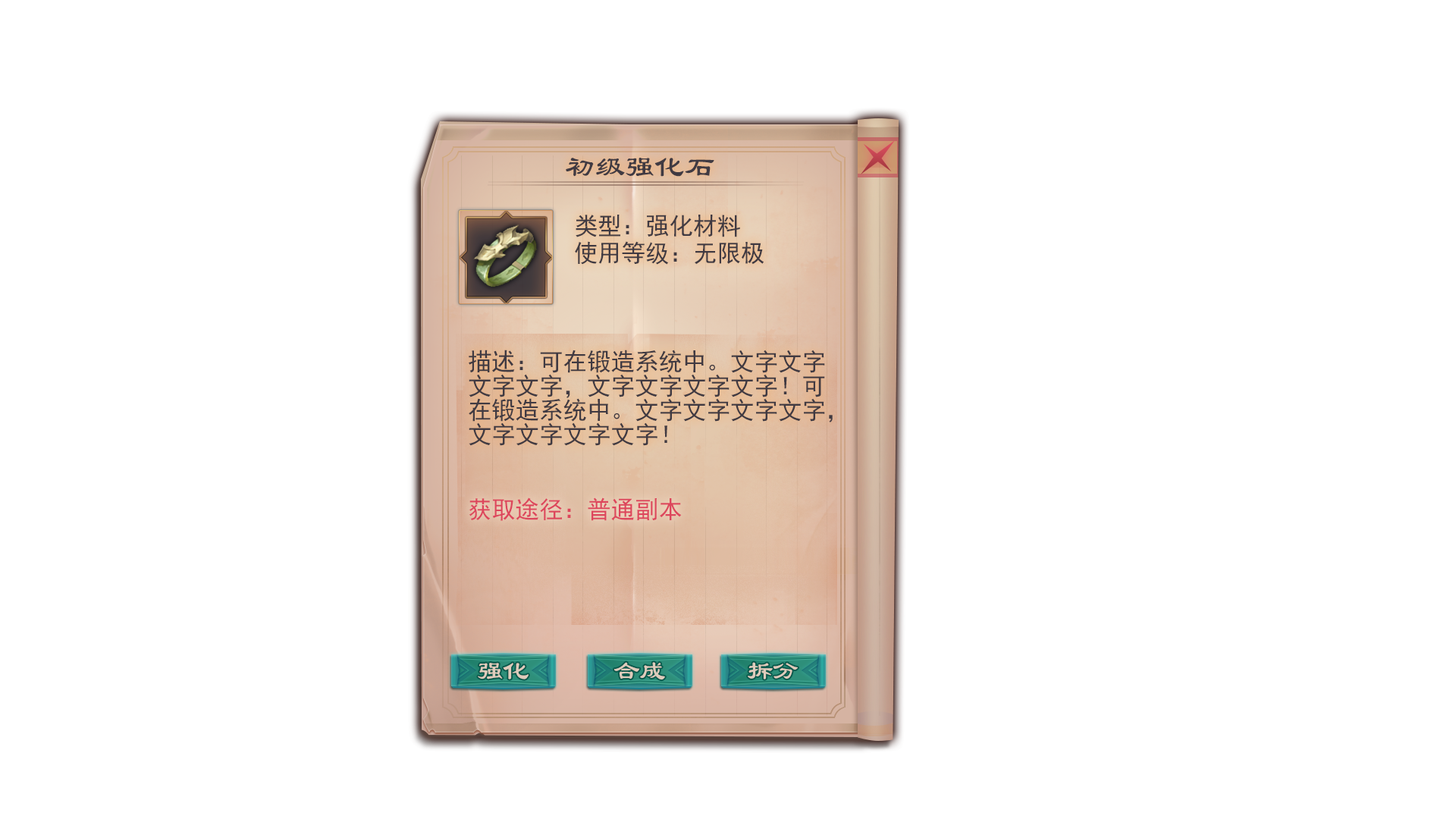
<style>
.page{position:relative;width:1456px;height:819px;background:#ffffff}
.page>*{position:absolute;margin:0}
.t1{font:30.3px "LiSu";color:#403a42}
.t2{font:24.3px "SimHei";color:#403a42}
.t3{font:24.3px/24.3px "SimHei";color:#403a42}
.t4{font:24.3px "SimHei";color:#dd465c}
.t5{font:26.5px "LiSu";color:#dfccbc}
</style>
<div class="page">
<p class="t1" style="left:566px;top:158px;width:148px;height:19px">初级强化石</p>
<p class="t2" style="left:576px;top:215px;width:164px;height:22px">类型：强化材料</p>
<p class="t2" style="left:575px;top:241px;width:189px;height:24px">使用等级：无限极</p>
<p class="t3" style="left:469px;top:350px;width:364px;height:96px">描述：可在锻造系统中。文字文字<br>文字文字，文字文字文字文字！可<br>在锻造系统中。文字文字文字文字，<br>文字文字文字文字！</p>
<p class="t4" style="left:469px;top:497px;width:213px;height:24px">获取途径：普通副本</p>
<p class="t5" style="left:478px;top:663px;width:51px;height:16px">强化</p>
<p class="t5" style="left:613px;top:662px;width:52px;height:18px">合成</p>
<p class="t5" style="left:748px;top:662px;width:50px;height:17px">拆分</p>
</div>
